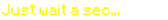
<style>
.page{position:relative;width:168px;height:20px;background:#ffffff}
.page>*{position:absolute;margin:0}
.t1{font:12.5px "Minecraftia-Regular";color:#fffb00}
</style>
<div class="page">
<p class="t1" style="left:1px;top:4px;width:119px;height:12px">Just wait a sec...</p>
</div>
